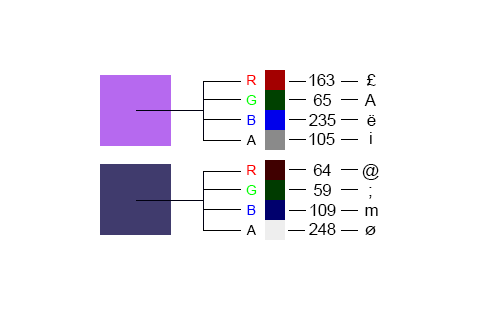
<style>
.page{position:relative;width:477px;height:309px;background:#ffffff}
.page>*{position:absolute;margin:0}
.t1{font:13.9px "ArialMT";letter-spacing:-0.02em;color:#ff0000;font-variant:small-caps}
.t2{font:16.7px "ArialMT";letter-spacing:-0.02em;color:#000000;font-variant:small-caps}
.t3{font:13.9px "ArialMT";letter-spacing:-0.02em;color:#00ff00;font-variant:small-caps}
.t4{font:16.7px "ArialMT";letter-spacing:-0.02em;color:#000000}
.t5{font:13.9px "ArialMT";letter-spacing:-0.02em;color:#0000ff;font-variant:small-caps}
.t6{font:13.9px "ArialMT";letter-spacing:-0.02em;color:#000000;font-variant:small-caps}
.t7{font:16.7px "ArialMT";letter-spacing:-0.02em}
</style>
<div class="page">
<p class="t1" style="left:247px;top:75px;width:10px;height:10px">R</p>
<p class="t2" style="left:309px;top:74px;width:26px;height:12px">163</p>
<p class="t2" style="left:366px;top:74px;width:10px;height:12px">£</p>
<p class="t3" style="left:246px;top:95px;width:11px;height:10px">G</p>
<p class="t2" style="left:313px;top:94px;width:19px;height:12px">65</p>
<p class="t4" style="left:364px;top:94px;width:12px;height:12px">A</p>
<p class="t5" style="left:247px;top:115px;width:9px;height:10px">B</p>
<p class="t2" style="left:309px;top:114px;width:27px;height:12px">235</p>
<p class="t4" style="left:367px;top:115px;width:9px;height:11px">ë</p>
<p class="t6" style="left:246px;top:135px;width:10px;height:10px">A</p>
<p class="t2" style="left:309px;top:133px;width:26px;height:12px">105</p>
<p class="t7" style="left:370px;top:132px;width:2px;height:12px">i</p>
<p class="t1" style="left:247px;top:165px;width:10px;height:10px">R</p>
<p class="t2" style="left:313px;top:164px;width:18px;height:12px">64</p>
<p class="t2" style="left:362px;top:164px;width:17px;height:16px">@</p>
<p class="t3" style="left:246px;top:185px;width:11px;height:10px">G</p>
<p class="t2" style="left:314px;top:184px;width:17px;height:12px">59</p>
<p class="t2" style="left:369px;top:187px;width:3px;height:12px">;</p>
<p class="t5" style="left:247px;top:205px;width:9px;height:10px">B</p>
<p class="t2" style="left:310px;top:204px;width:26px;height:12px">109</p>
<p class="t4" style="left:365px;top:207px;width:13px;height:9px">m</p>
<p class="t6" style="left:246px;top:225px;width:10px;height:10px">A</p>
<p class="t2" style="left:309px;top:223px;width:27px;height:12px">248</p>
<p class="t2" style="left:365px;top:226px;width:11px;height:9px">ø</p>
</div>
